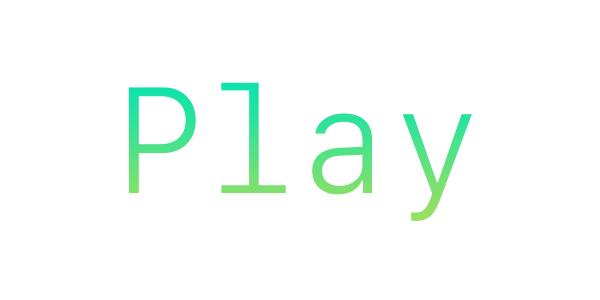
<style>
.page{position:relative;width:600px;height:300px;background:#ffffff}
.page>*{position:absolute;margin:0}
.t1{font:150px "SFMono-Light"}
</style>
<div class="page">
<p class="t1" style="left:128px;top:82px;width:344px;height:139px">Play</p>
</div>
